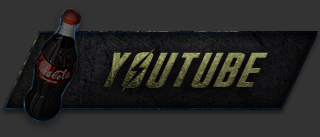
<style>
.page{position:relative;width:320px;height:137px;background:#333333}
.page>*{position:absolute;margin:0}
.t1{font:55.2px "Overseer";letter-spacing:0.06em;scale:0.91 1}
</style>
<div class="page">
<p class="t1" style="left:103px;top:48px;width:165px;height:44px">YOUTUBE</p>
</div>
